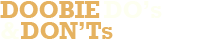
<style>
.page{position:relative;width:200px;height:40px;background:#ffffff}
.page>*{position:absolute;margin:0}
.t1{font:24px "Rockwell-Bold";letter-spacing:-0.025em;color:#e5b260}
.t2{font:24px "Rockwell-Bold";letter-spacing:-0.025em;color:#fdfff0}
</style>
<div class="page">
<p class="t1" style="left:0px;top:1px;width:100px;height:17px">DOOBIE</p>
<p class="t2" style="left:104px;top:1px;width:58px;height:17px">DO’s</p>
<p class="t2" style="left:1px;top:22px;width:18px;height:17px">&amp;</p>
<p class="t1" style="left:21px;top:22px;width:92px;height:17px">DON’Ts</p>
</div>
